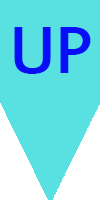
<style>
.page{position:relative;width:100px;height:200px;background:#59e1e2}
.page>*{position:absolute;margin:0}
.t1{font:60px "EuphemiaUCAS-Bold";letter-spacing:0.02em;color:#090ef9}
</style>
<div class="page">
<p class="t1" style="left:14px;top:27px;width:77px;height:47px">UP</p>
</div>
